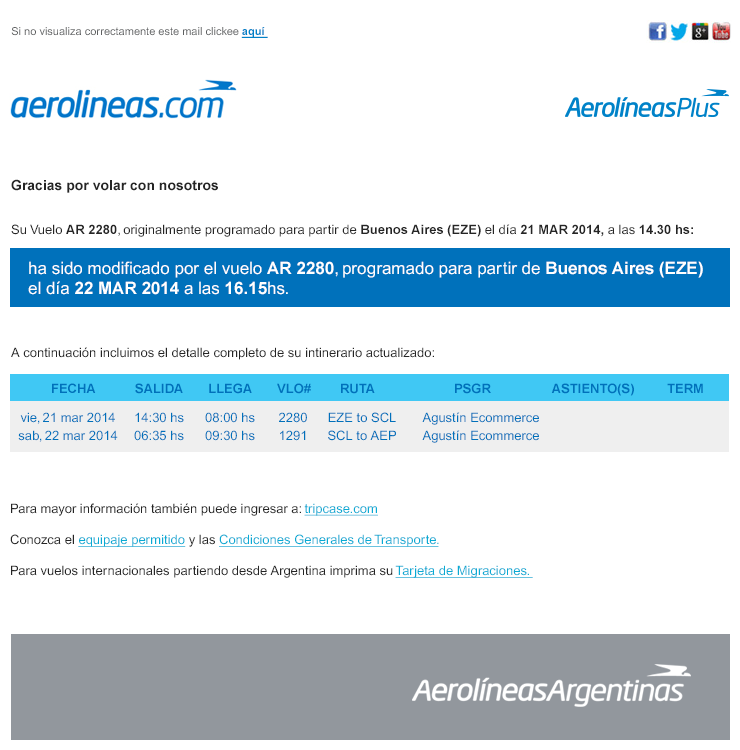
<style>
.page{position:relative;width:740px;height:750px;background:#ffffff}
.page>*{position:absolute;margin:0}
.t1{font:11px "ArialMT";color:#5e6061}
.t2{font:11px "Arial-BoldMT";color:#0082c8;text-decoration:underline}
.t3{font:13px "ArialMT";color:#252525}
.t4{font:14px "Arial-BoldMT";color:#252525}
.t5{font:13px "Arial-BoldMT";color:#252525}
.t6{font:17px "ArialMT";color:#ffffff}
.t7{font:17px "Arial-BoldMT";color:#ffffff}
.t8{font:13px "Arial-BoldMT";color:#0071bb}
.t9{font:13px/18px "ArialMT";color:#0071bb}
.t10{font:13px "ArialMT";color:#08abd4;text-decoration:underline}
</style>
<div class="page">
<p class="t1" style="left:11px;top:27px;width:257px;height:11px">Si no visualiza correctamente este mail clickee <span class="t2">aquí</span></p>
<p class="t3" style="left:11px;top:179px;width:682px;height:58px"><span class="t4">Gracias por volar con nosotros<br><br><br></span>Su Vuelo <span class="t5">AR 2280</span>, originalmente programado para partir de<span class="t5"> Buenos Aires (EZE)</span> el día <span class="t5">21 MAR 2014,</span> a las <span class="t5">14.30 hs:</span></p>
<p class="t6" style="left:28px;top:261px;width:675px;height:34px">ha sido modificado por el vuelo <span class="t7">AR 2280</span>, programado para partir de <span class="t7">Buenos Aires (EZE)<br></span>el día <span class="t7">22 MAR 2014</span> a las <span class="t7">16.15</span>hs.</p>
<p class="t3" style="left:11px;top:347px;width:423px;height:13px">A continuación incluimos el detalle completo de su intinerario actualizado:</p>
<p class="t8" style="left:52px;top:383px;width:651px;height:13px">FECHA           SALIDA       LLEGA       VLO#        RUTA                      PSGR                 ASTIENTO(S)         TERM</p>
<p class="t9" style="left:18px;top:412px;width:100px;height:30px;text-align:center">vie, 21 mar 2014<br>sab, 22 mar 2014</p>
<p class="t9" style="left:134px;top:412px;width:50px;height:29px;text-align:center">14:30 hs<br>06:35 hs</p>
<p class="t9" style="left:205px;top:412px;width:50px;height:29px;text-align:center">08:00 hs<br>09:30 hs</p>
<p class="t9" style="left:279px;top:412px;width:28px;height:29px;text-align:center">2280<br>1291</p>
<p class="t9" style="left:328px;top:412px;width:68px;height:29px;text-align:center">EZE to SCL<br>SCL to AEP</p>
<p class="t9" style="left:422px;top:412px;width:117px;height:31px;text-align:center">Agustín Ecommerce<br>Agustín Ecommerce</p>
<p class="t3" style="left:10px;top:503px;width:523px;height:75px">Para mayor información también puede ingresar a: <span class="t10">tripcase.com<br><br></span>Conozca el <span class="t10">equipaje permitido </span>y las <span class="t10">Condiciones Generales de Transporte.<br><br></span>Para vuelos internacionales partiendo desde Argentina imprima su <span class="t10">Tarjeta de Migraciones.</span></p>
</div>
